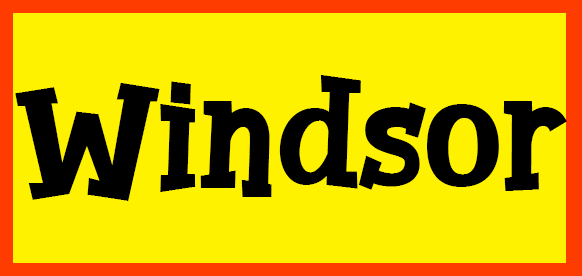
<style>
.page{position:relative;width:582px;height:276px;background:#fff200}
.page>*{position:absolute;margin:0}
.t1{font:79.1px "TheBomb";color:#000000}
</style>
<div class="page">
<p class="t1" style="left:15px;top:75px;width:552px;height:126px">Windsor</p>
</div>
